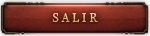
<style>
.page{position:relative;width:150px;height:36px}
.page>*{position:absolute;margin:0}
.t1{font:11.5px "Georgia";letter-spacing:0.25em;text-transform:uppercase}
</style>
<div class="page">
<p class="t1" style="left:52px;top:14px;width:46px;height:9px">SALIR</p>
<p class="t1" style="left:52px;top:13px;width:46px;height:9px">SALIR</p>
<p class="t1" style="left:52px;top:13px;width:46px;height:9px">SALIR</p>
<p class="t1" style="left:52px;top:13px;width:46px;height:9px">SALIR</p>
</div>
